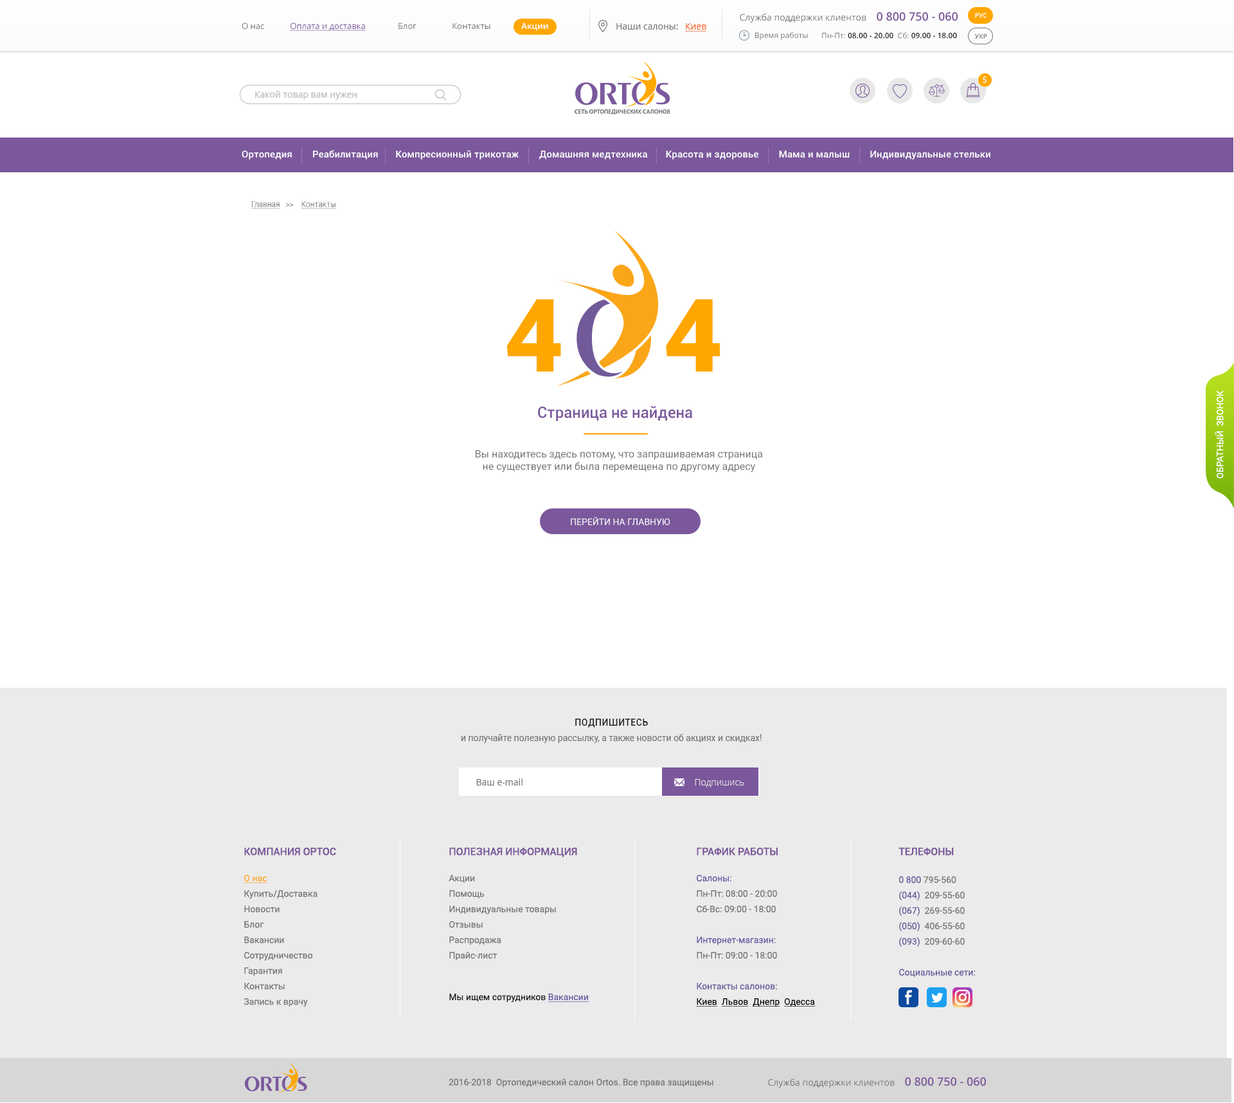
<style>
.page{position:relative;width:1234px;height:1103px;background:#ffffff}
.page>*{position:absolute;margin:0}
.t1{font:9px "OpenSans";color:#757575}
.t2{font:11.6px "OpenSans-Semibold";color:#7b589c}
.t3{font:6.4px "OpenSans-Semibold";color:#ffffff;text-transform:uppercase}
.t4{font:8.4px "OpenSans";color:#757575}
.t5{font:8.4px "OpenSans";color:#7b589c;text-decoration:underline}
.t6{font:8.4px "OpenSans-Semibold";color:#ffffff}
.t7{font:9px "OpenSans";color:#f26022;text-decoration:underline}
.t8{font:7.7px "OpenSans";color:#757575}
.t9{font:7.7px "OpenSans-Semibold";color:#212121}
.t10{font:6.4px "OpenSans-Semibold";color:#757575;text-transform:uppercase}
.t11{font:9px "MyriadPro-Regular";letter-spacing:0.1em;color:#ffffff;text-transform:uppercase}
.t12{font:9px "OpenSans";color:#b7b7b7}
.t13{font:9.6px "Roboto-Medium";letter-spacing:0.01em;color:#ffffff}
.t14{font:7.7px "Roboto-Light";color:#757575;text-decoration:underline}
.t15{font:7.7px "Roboto-Light";color:#757575}
.t16{font:101.5px "Roboto-Black";letter-spacing:0.05em;color:#ffa700}
.t17{font:9px "Roboto-Regular";color:#ffffff;text-transform:uppercase}
.t18{font:15.4px "Roboto-Medium";color:#7b589c}
.t19{font:10.3px "Roboto-Regular";color:#757575}
.t20{font:9px/15.4px "Roboto-Regular";color:#757575}
.t21{font:9px "Roboto-Medium";letter-spacing:0.05em;color:#212121;text-transform:uppercase}
.t22{font:9px "OpenSans-Light";color:#ebebeb}
.t23{font:10.3px "Roboto-Medium";color:#7b589c;text-transform:uppercase}
.t24{font:9px/15.4px "Roboto-Regular";color:#faa61a;text-decoration:underline}
.t25{font:9px "Roboto-Regular";color:#181716}
.t26{font:9px "Roboto-Regular";color:#6858a1;text-decoration:underline}
.t27{font:9px/15.4px "Roboto-Regular";color:#6758a2}
.t28{font:9px/15.4px "Roboto-Regular";color:#68579a}
.t29{font:9px/15.4px "Roboto-Regular";color:#000000;text-decoration:underline}
.t30{font:9px "Roboto-Regular";color:#757575}
</style>
<div class="page">
<p class="t1" style="left:740px;top:12px;width:218px;height:11px">Служба поддержки клиентов     <span class="t2">0 800 750 - 060</span></p>
<p class="t3" style="left:975px;top:13px;width:12px;height:5px">Рус</p>
<p class="t4" style="left:242px;top:22px;width:306px;height:9px">О нас       <span class="t5">Оплата и доставка</span>         Блог        Контакты   <span class="t6">Акции</span></p>
<p class="t1" style="left:616px;top:23px;width:91px;height:9px">Наши салоны: <span class="t7">Киев</span></p>
<p class="t8" style="left:755px;top:32px;width:53px;height:8px">Время работы</p>
<p class="t9" style="left:822px;top:32px;width:135px;height:7px"><span class="t8">Пн-Пт: </span>08.00 - 20.00<span class="t8">  Сб: </span>09.00 - 18.00</p>
<p class="t10" style="left:975px;top:33px;width:12px;height:6px">Укр</p>
<p class="t11" style="left:983px;top:76px;width:4px;height:7px">5</p>
<p class="t12" style="left:255px;top:91px;width:102px;height:9px">Какой товар вам нужен</p>
<p class="t13" style="left:242px;top:150px;width:749px;height:9px">Ортопедия        Реабилитация       Компресионный трикотаж         Домашняя медтехника    Красота и здоровье   Мама и малыш        Индивидуальные стельки</p>
<p class="t14" style="left:251px;top:201px;width:86px;height:8px">Главная<span class="t15">   &gt;&gt;   </span>Контакты</p>
<p class="t16" style="left:507px;top:299px;width:54px;height:73px">4</p>
<p class="t16" style="left:666px;top:299px;width:54px;height:73px">4</p>
<p class="t17" style="left:1215px;top:390px;width:9px;height:88px;rotate:-90deg">обратный  звонок</p>
<p class="t18" style="left:538px;top:406px;width:154px;height:15px">Страница не найдена</p>
<p class="t19" style="left:476px;top:450px;width:286px;height:23px;text-align:center">Вы находитесь здесь потому, что запрашиваемая страница не существует или была перемещена по другому адресу</p>
<p class="t17" style="left:571px;top:517px;width:99px;height:8px">Перейти на главную</p>
<p class="t20" style="left:461px;top:719px;width:301px;height:24px;text-align:center"><span class="t21">Подпишитесь <br></span>и получайте полезную рассылку, а также новости об акциях и скидках!</p>
<p class="t1" style="left:476px;top:779px;width:47px;height:7px">Ваш e-mail</p>
<p class="t22" style="left:695px;top:779px;width:49px;height:9px">Подпишись</p>
<p class="t20" style="left:244px;top:847px;width:92px;height:160px"><span class="t23">Компания Ортос<br><br></span><span class="t24">О нас<br></span>Купить/Доставка<br>Новости<br>Блог<br>Вакансии<br>Сотрудничество<br>Гарантия<br>Контакты<br>Запись к врачу</p>
<p class="t20" style="left:449px;top:847px;width:140px;height:155px"><span class="t23">Полезная информация<br><br></span>Акции<br>Помощь<br>Индивидуальные товары<br>Отзывы<br>Распродажа<br>Прайс-лист<br><br><br><span class="t25">Мы ищем сотрудников </span><span class="t26">Вакансии</span></p>
<p class="t20" style="left:696px;top:847px;width:119px;height:160px"><span class="t23">График работы<br><br></span><span class="t27">Салоны:<br></span>Пн-Пт: 08:00 - 20:00 <br>Сб-Вс: 09:00 - 18:00<br><br><span class="t27">Интернет-магазин:<br></span>Пн-Пт: 09:00 - 18:00<br><br><span class="t28">Контакты салонов:<br></span><span class="t29">Киев  Львов  Днепр  Одесса</span></p>
<p class="t28" style="left:899px;top:847px;width:76px;height:130px"><span class="t23">Телефоны<br><br></span>0 800 <span class="t20">795-560<br></span>(044)  <span class="t20">209-55-60<br></span>(067)  <span class="t20">269-55-60<br></span>(050)  <span class="t20">406-55-60<br></span>(093)  <span class="t20">209-60-60<br><br></span>Социальные сети:</p>
<p class="t30" style="left:449px;top:1079px;width:265px;height:9px">2016-2018  Ортопедический салон Ortos. Все права защищены</p>
<p class="t1" style="left:768px;top:1077px;width:218px;height:11px">Служба поддержки клиентов     <span class="t2">0 800 750 - 060</span></p>
</div>
